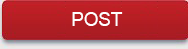
<style>
.page{position:relative;width:188px;height:49px}
.page>*{position:absolute;margin:0}
.t1{font:18.7px "ArialMT";color:#ffffff}
</style>
<div class="page">
<p class="t1" style="left:72px;top:12px;width:51px;height:14px">POST</p>
</div>
